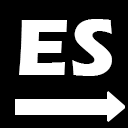
<style>
.page{position:relative;width:128px;height:128px;background:#000000}
.page>*{position:absolute;margin:0}
.t1{font:83.3px "ErasITC-Bold";color:#ffffff}
</style>
<div class="page">
<p class="t1" style="left:19px;top:19px;width:93px;height:57px">ES</p>
</div>
